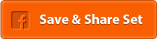
<style>
.page{position:relative;width:157px;height:39px;background:#f95e00}
.page>*{position:absolute;margin:0}
.t1{font:14px "MyriadPro-Bold";color:#ffffff}
</style>
<div class="page">
<p class="t1" style="left:40px;top:14px;width:103px;height:10px">Save &amp; Share Set</p>
</div>
